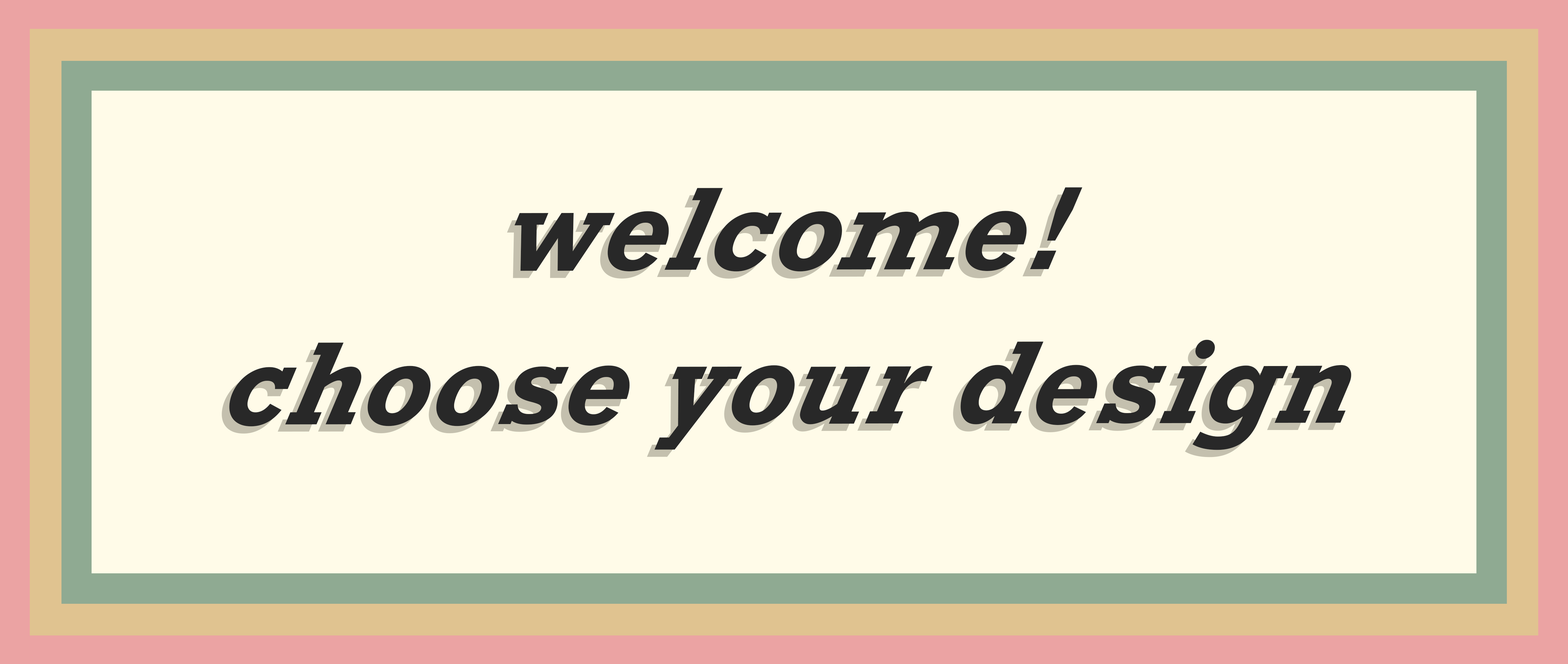
<style>
.page{position:relative;width:1568px;height:664px;background:#fffbe8}
.page>*{position:absolute;margin:0}
.t1{font:111px/154.1px "Rockwell-BoldItalic";letter-spacing:0.025em;font-style:italic}
.t2{font:111px/154.1px "Rockwell-BoldItalic";letter-spacing:0.025em;color:#282828;font-style:italic}
</style>
<div class="page">
<p class="t1" style="left:222px;top:194px;width:1122px;height:263px;text-align:justify">welcome!<br>choose your design</p>
<p class="t2" style="left:229px;top:187px;width:1122px;height:263px;text-align:justify">welcome!<br>choose your design</p>
</div>
